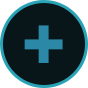
<style>
.page{position:relative;width:88px;height:88px;background:#091619}
.page>*{position:absolute;margin:0}
.t1{font:79.5px "Impact";color:#2b88a6}
</style>
<div class="page">
<p class="t1" style="left:24px;top:25px;width:39px;height:38px">+</p>
</div>
